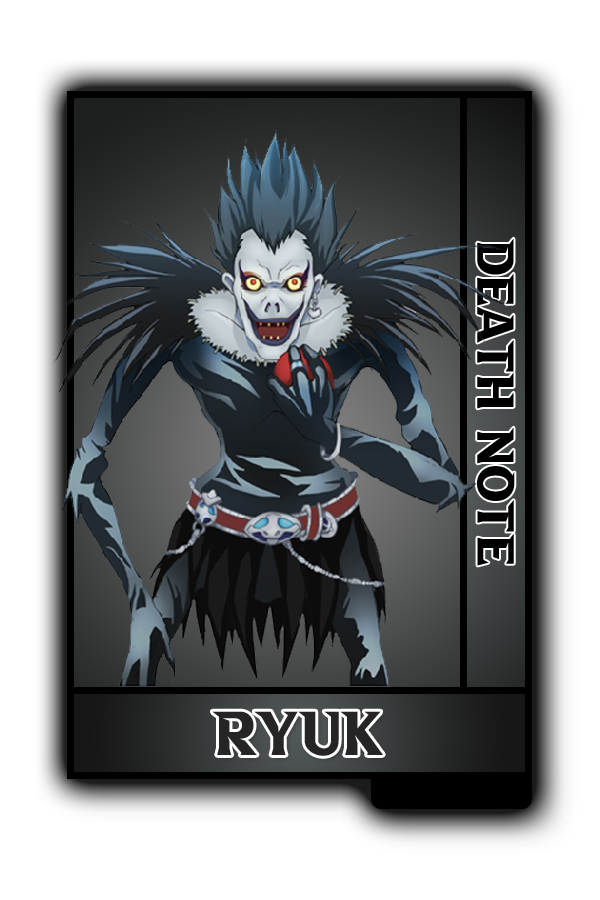
<style>
.page{position:relative;width:600px;height:900px;background:#ffffff}
.page>*{position:absolute;margin:0}
.t1{font:48.8px "aAbsoluteEmpire";color:#000000}
.t2{font:58.3px "aAbsoluteEmpire";color:#252525}
</style>
<div class="page">
<p class="t1" style="left:477px;top:238px;width:38px;height:328px;rotate:90deg">Death Note</p>
<p class="t2" style="left:212px;top:711px;width:171px;height:45px">Ryuk</p>
</div>
